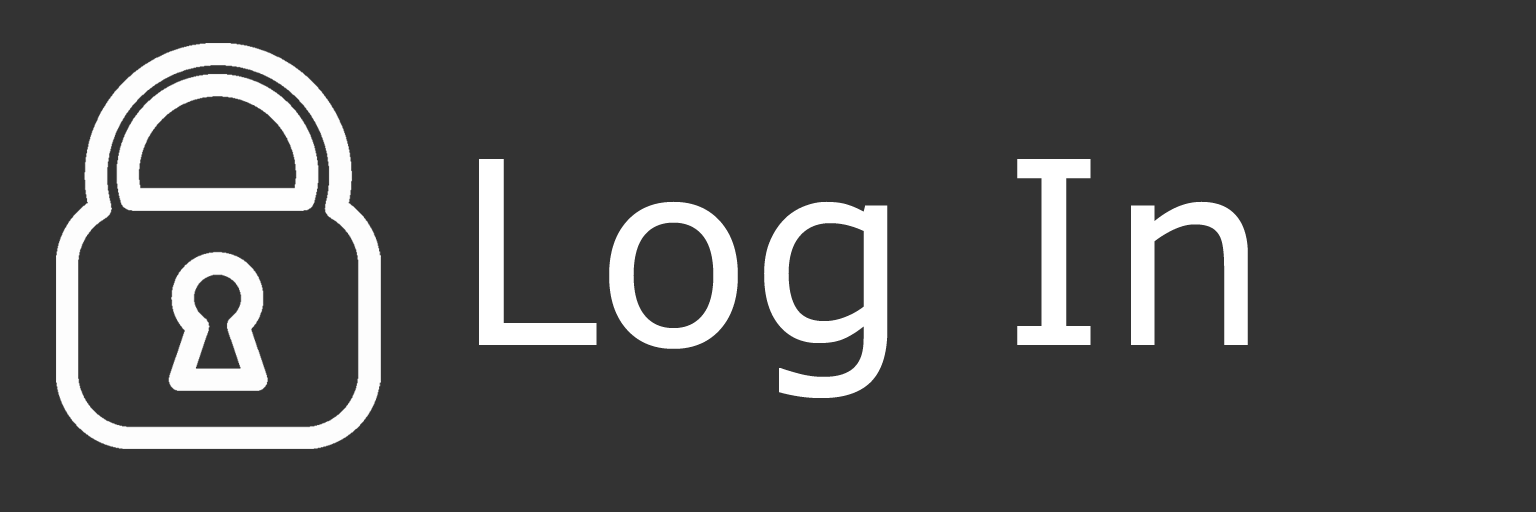
<style>
.page{position:relative;width:1536px;height:512px;background:#333333}
.page>*{position:absolute;margin:0}
.t1{font:255.6px "Verdana";color:#ffffff}
</style>
<div class="page">
<p class="t1" style="left:479px;top:159px;width:769px;height:239px">Log In</p>
</div>
